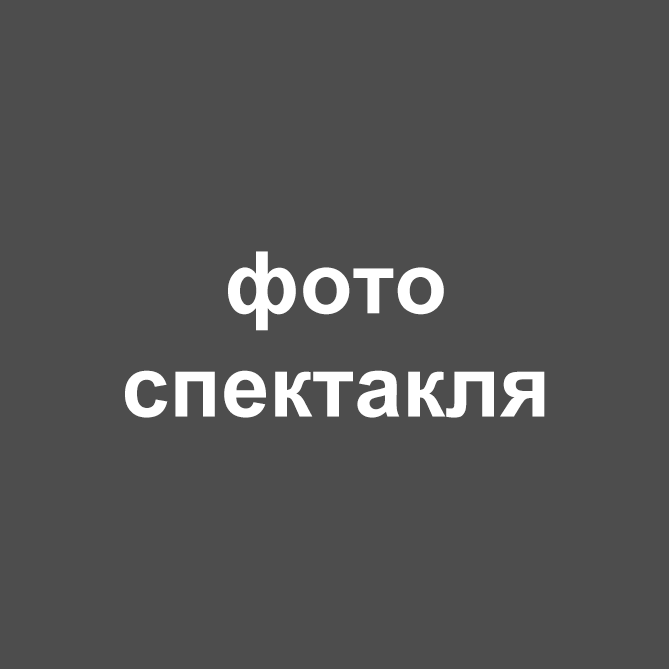
<style>
.page{position:relative;width:669px;height:669px;background:#4d4d4d}
.page>*{position:absolute;margin:0}
.t1{font:86px "Arial-BoldMT";color:#ffffff}
</style>
<div class="page">
<p class="t1" style="left:125px;top:251px;width:420px;height:167px;text-align:center">фото<br>спектакля</p>
</div>
